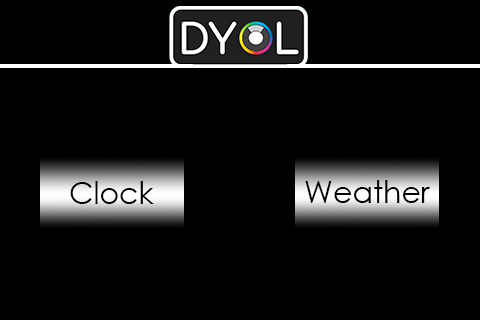
<style>
.page{position:relative;width:480px;height:320px;background:#000000}
.page>*{position:absolute;margin:0}
.t1{font:30px "CenturyGothic";color:#000000}
</style>
<div class="page">
<p class="t1" style="left:70px;top:181px;width:84px;height:23px">Clock</p>
<p class="t1" style="left:305px;top:180px;width:125px;height:23px">Weather</p>
</div>
